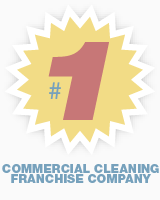
<style>
.page{position:relative;width:160px;height:200px;background:#fafafa}
.page>*{position:absolute;margin:0}
.t1{font:112px "HelveticaNeueLTStd-BlkExO";color:#c77777}
.t2{font:24px "HelveticaNeueLTStd-Roman";color:#76a1bc}
.t3{font:12px/10px "HelveticaNeueLTStd-Blk";color:#76a1bc}
</style>
<div class="page">
<p class="t1" style="left:48px;top:42px;width:61px;height:78px">1</p>
<p class="t2" style="left:49px;top:82px;width:12px;height:17px">#</p>
<p class="t3" style="left:2px;top:164px;width:157px;height:19px;text-align:center">COMMERCIAL CLEANING<br>FRANCHISE COMPANY</p>
</div>
